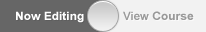
<style>
.page{position:relative;width:206px;height:32px;background:#f2f2f2}
.page>*{position:absolute;margin:0}
.t1{font:11.4px "Arial-BoldMT";color:#ffffff;scale:1.05 1}
.t2{font:11.4px "Arial-BoldMT";color:#a4a4a4}
</style>
<div class="page">
<p class="t1" style="left:16px;top:11px;width:68px;height:12px">Now Editing</p>
<p class="t1" style="left:123px;top:11px;width:71px;height:9px"><span class="t2">View </span>Course</p>
</div>
